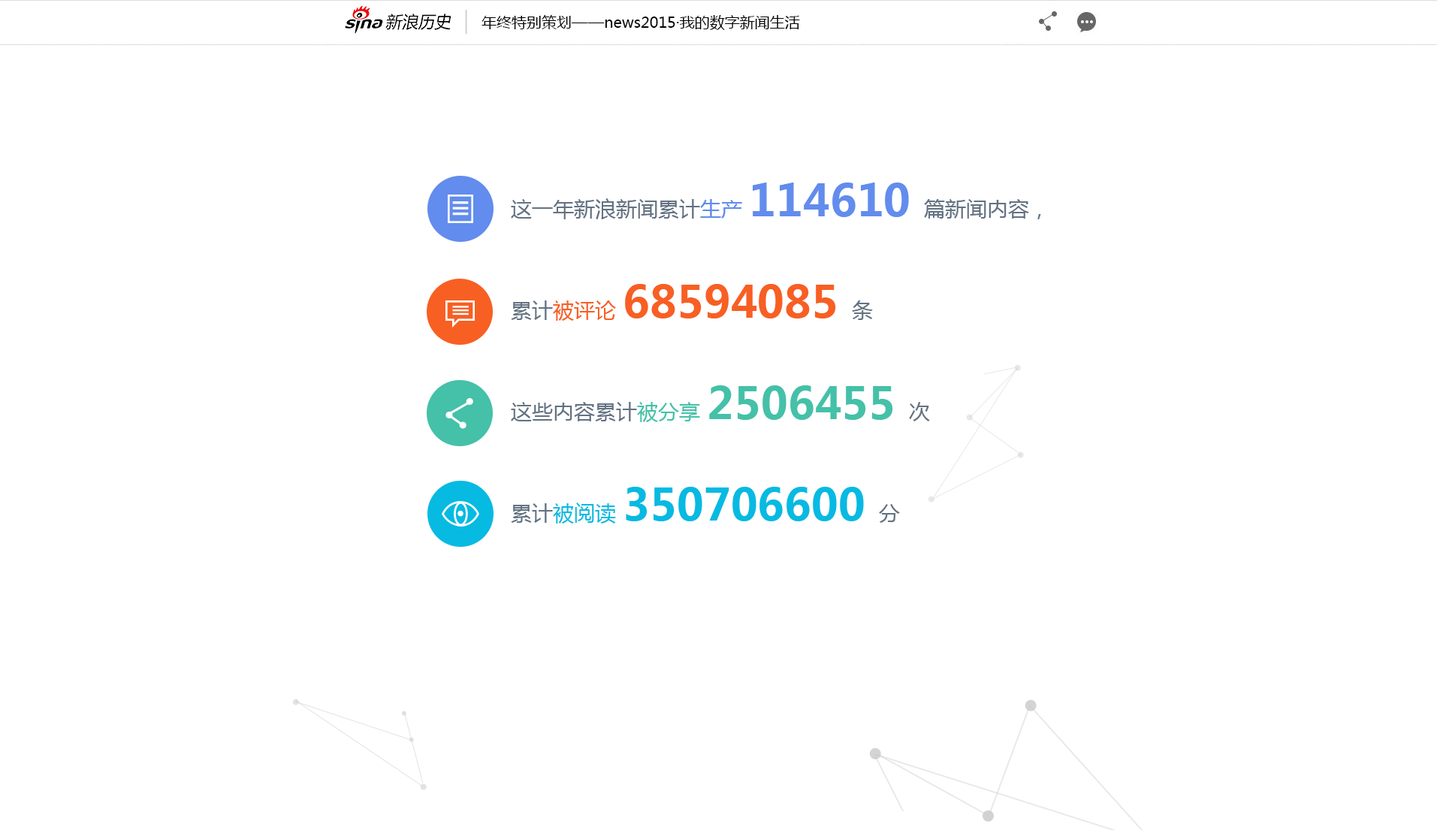
<style>
.page{position:relative;width:1437px;height:830px;background:#ffffff}
.page>*{position:absolute;margin:0}
.t1{font:15px "MicrosoftYaHei";color:#000000}
.t2{font:21px/101.4px "MicrosoftYaHei";color:#637282}
.t3{font:21px/101.4px "MicrosoftYaHei";color:#628ced}
.t4{font:43.8px/101.4px "MicrosoftYaHei-Bold";color:#628ced}
.t5{font:21px/101.4px "MicrosoftYaHei";color:#f85f23}
.t6{font:43.8px/101.4px "MicrosoftYaHei-Bold";color:#f85f23}
.t7{font:21px/101.4px "MicrosoftYaHei";color:#44c1a8}
.t8{font:43.8px/101.4px "MicrosoftYaHei-Bold";color:#44c1a8}
.t9{font:21px/101.4px "MicrosoftYaHei";color:#06bae2}
.t10{font:43.8px/101.4px "MicrosoftYaHei-Bold";color:#06bae2}
</style>
<div class="page">
<p class="t1" style="left:481px;top:15px;width:319px;height:15px">年终特别策划——news2015·我的数字新闻生活</p>
<p class="t2" style="left:511px;top:182px;width:530px;height:341px">这一年新浪新闻累计<span class="t3">生产 </span><span class="t4">114610 </span>篇新闻内容，<br>累计<span class="t5">被评论 </span><span class="t6">68594085 </span>条<br>这些内容累计<span class="t7">被分享 </span><span class="t8">2506455 </span>次<br>累计<span class="t9">被阅读 </span><span class="t10">350706600 </span>分</p>
</div>
